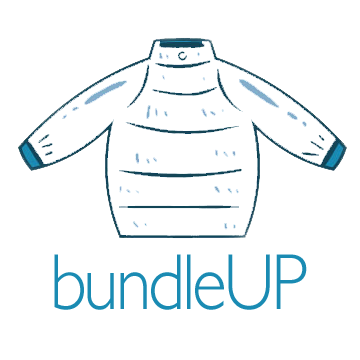
<style>
.page{position:relative;width:360px;height:360px;background:#ffffff}
.page>*{position:absolute;margin:0}
.t1{font:80px "GillSans-Light";letter-spacing:-0.04em;color:#1a8bb3;scale:0.9 1}
</style>
<div class="page">
<p class="t1" style="left:54px;top:254px;width:253px;height:56px">bundleUP</p>
</div>
